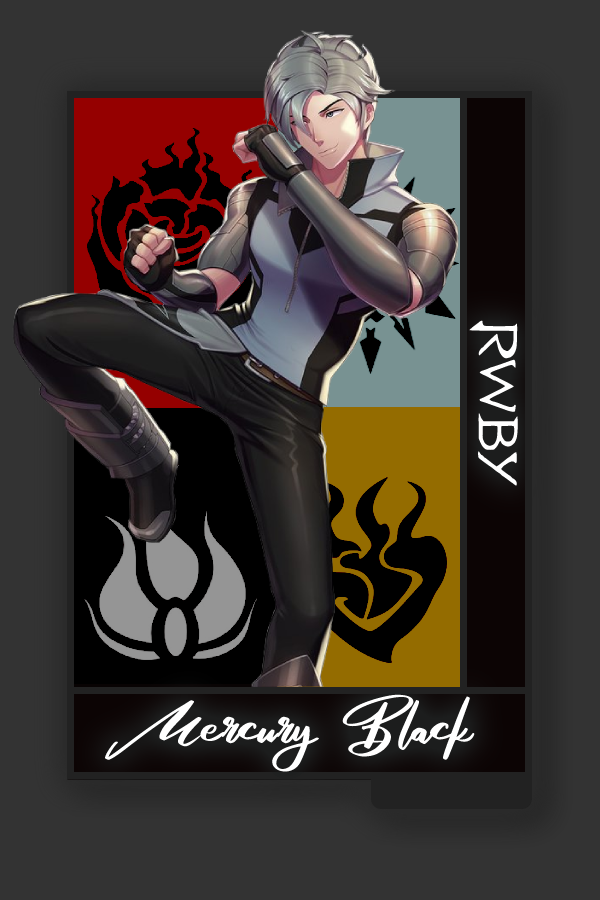
<style>
.page{position:relative;width:600px;height:900px;background:#333333}
.page>*{position:absolute;margin:0}
.t1{font:61.3px "RWBY_Style";color:#ffffff;scale:1.25 1}
.t2{font:75px "RosegaFREE";color:#ffffff}
</style>
<div class="page">
<p class="t1" style="left:469px;top:320px;width:49px;height:166px;rotate:90deg">RWBY</p>
<p class="t2" style="left:104px;top:694px;width:371px;height:83px">Mercury Black</p>
</div>
